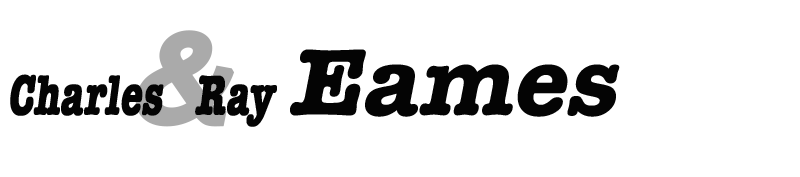
<style>
.page{position:relative;width:800px;height:177px;background:#ffffff}
.page>*{position:absolute;margin:0}
.t1{font:131.1px "FranklinGothic-Medium";color:#aaaaaa;font-weight:bold;font-style:italic}
.t2{font:97.8px "AmericanTypewriter-Bold";color:#040404;font-style:italic}
.t3{font:57.6px "AmericanTypewriter-Bold";color:#040404;font-weight:bold;font-style:italic;scale:0.67 1}
</style>
<div class="page">
<p class="t1" style="left:135px;top:30px;width:100px;height:97px">&amp;</p>
<p class="t2" style="left:290px;top:49px;width:330px;height:68px">Eames</p>
<p class="t3" style="left:10px;top:74px;width:267px;height:53px">Charles   Ray</p>
</div>
